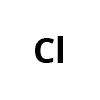
<style>
.page{position:relative;width:100px;height:100px;background:#ffffff}
.page>*{position:absolute;margin:0}
.t1{font:35px "OpenSans-Bold";color:#000000}
</style>
<div class="page">
<p class="t1" style="left:35px;top:36px;width:28px;height:27px">Cl</p>
</div>
